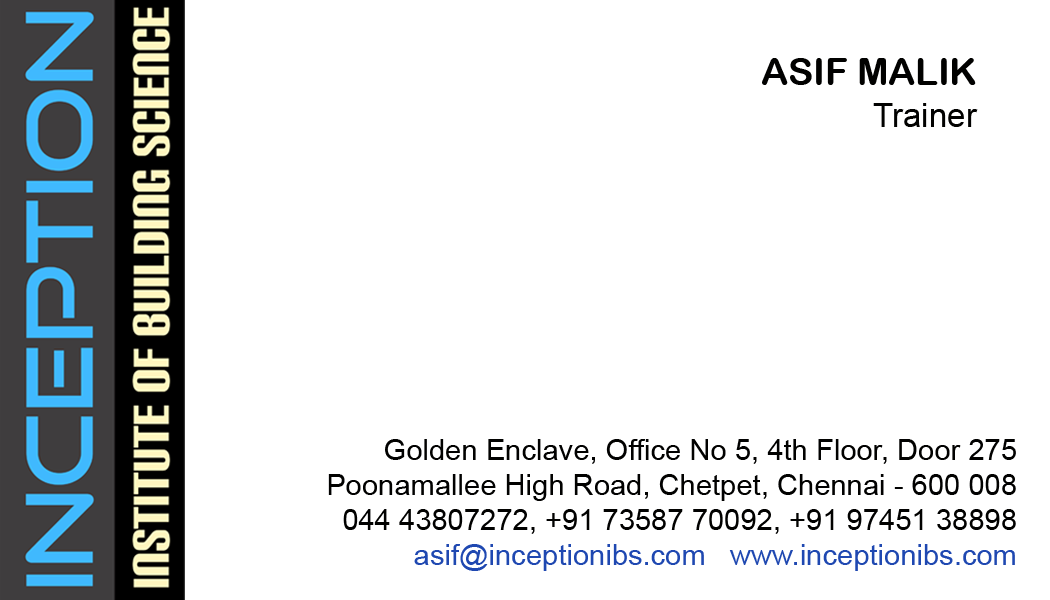
<style>
.page{position:relative;width:1050px;height:600px;background:#ffffff}
.page>*{position:absolute;margin:0}
.t1{font:37.5px "ArialRoundedMTBold";color:#010100}
.t2{font:33.3px "ArialMT";color:#010100}
.t3{font:29.2px "ArialMT";color:#010100}
.t4{font:29.2px "ArialMT";color:#1f48b1}
</style>
<div class="page">
<p class="t1" style="left:762px;top:58px;width:214px;height:27px">ASIF MALIK</p>
<p class="t2" style="left:873px;top:103px;width:105px;height:24px">Trainer</p>
<p class="t3" style="left:328px;top:439px;width:688px;height:132px;text-align:right">Golden Enclave, Office No 5, 4th Floor, Door 275<br>Poonamallee High Road, Chetpet, Chennai - 600 008<br>044 43807272, +91 73587 70092, +91 97451 38898<br><span class="t4">asif@inceptionibs.com   www.inceptionibs.com</span></p>
</div>
